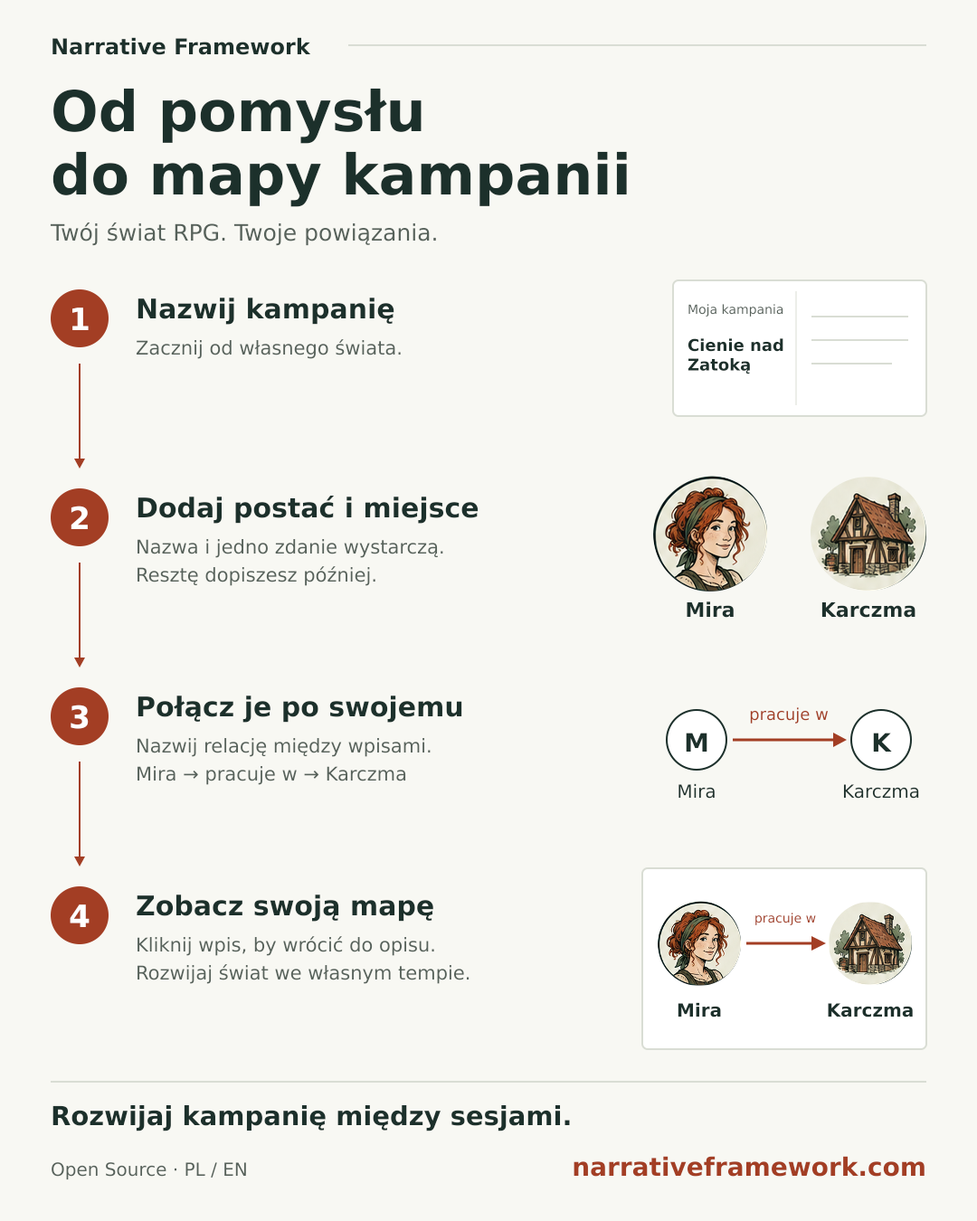
<style>
.page{position:relative;width:977px;height:1221px;background:#f8f8f3}
.page>*{position:absolute;margin:0}
.t1{font:21.7px "DejaVuSans-Bold";color:#1c302b}
.t2{font:56.1px "DejaVuSans-Bold";color:#1c302b}
.t3{font:22.6px "DejaVuSans-Regular";color:#56615a}
.t4{font:27.1px "DejaVuSans-Bold";color:#1c302b}
.t5{font:12.7px "DejaVuSans-Regular";color:#56615a}
.t6{font:30.7px "DejaVuSans-Bold";color:#ffffff}
.t7{font:19px "DejaVuSans-Regular";color:#56615a}
.t8{font:16.3px "DejaVuSans-Bold";color:#1c302b}
.t9{font:19.9px "DejaVuSans-Bold";color:#1c302b}
.t10{font:16.3px "DejaVuSans-Regular";color:#a33e24}
.t11{font:25.3px "DejaVuSans-Bold";color:#1c302b}
.t12{font:18.1px "DejaVuSans-Regular";color:#1c302b}
.t13{font:12.7px "DejaVuSans-Regular";color:#a33e24}
.t14{font:18.1px "DejaVuSans-Bold";color:#1c302b}
.t15{font:26.2px "DejaVuSans-Bold";color:#1c302b}
.t16{font:25.3px "DejaVuSans-Bold";color:#a33e24}
.t17{font:18.1px "DejaVuSans-Regular";color:#56615a}
</style>
<div class="page">
<p class="t1" style="left:52px;top:37px;width:260px;height:19px">Narrative Framework</p>
<p class="t2" style="left:52px;top:88px;width:370px;height:57px">Od pomysłu</p>
<p class="t2" style="left:52px;top:151px;width:576px;height:57px">do mapy kampanii</p>
<p class="t3" style="left:49px;top:222px;width:388px;height:25px">Twój świat RPG. Twoje powiązania.</p>
<p class="t4" style="left:137px;top:298px;width:258px;height:28px">Nazwij kampanię</p>
<p class="t5" style="left:687px;top:304px;width:97px;height:13px">Moja kampania</p>
<p class="t6" style="left:71px;top:307px;width:19px;height:24px">1</p>
<p class="t7" style="left:135px;top:339px;width:267px;height:21px">Zacznij od własnego świata.</p>
<p class="t8" style="left:686px;top:338px;width:98px;height:37px">Cienie nad<br>Zatoką</p>
<p class="t4" style="left:137px;top:496px;width:342px;height:29px">Dodaj postać i miejsce</p>
<p class="t6" style="left:70px;top:506px;width:19px;height:24px">2</p>
<p class="t7" style="left:137px;top:539px;width:307px;height:20px">Nazwa i jedno zdanie wystarczą.</p>
<p class="t7" style="left:137px;top:566px;width:239px;height:21px">Resztę dopiszesz później.</p>
<p class="t9" style="left:685px;top:601px;width:49px;height:18px">Mira</p>
<p class="t9" style="left:820px;top:601px;width:96px;height:18px">Karczma</p>
<p class="t4" style="left:137px;top:695px;width:326px;height:28px">Połącz je po swojemu</p>
<p class="t6" style="left:70px;top:704px;width:20px;height:26px">3</p>
<p class="t10" style="left:749px;top:707px;width:80px;height:17px">pracuje w</p>
<p class="t7" style="left:137px;top:738px;width:294px;height:20px">Nazwij relację między wpisami.</p>
<p class="t11" style="left:685px;top:733px;width:23px;height:19px">M</p>
<p class="t11" style="left:872px;top:733px;width:21px;height:19px">K</p>
<p class="t7" style="left:137px;top:766px;width:270px;height:20px">Mira → pracuje w → Karczma</p>
<p class="t12" style="left:677px;top:783px;width:38px;height:16px">Mira</p>
<p class="t12" style="left:842px;top:784px;width:78px;height:15px">Karczma</p>
<p class="t6" style="left:69px;top:904px;width:21px;height:23px">4</p>
<p class="t4" style="left:136px;top:894px;width:298px;height:28px">Zobacz swoją mapę</p>
<p class="t13" style="left:754px;top:912px;width:63px;height:14px">pracuje w</p>
<p class="t7" style="left:137px;top:936px;width:298px;height:20px">Kliknij wpis, by wrócić do opisu.</p>
<p class="t7" style="left:137px;top:964px;width:333px;height:21px">Rozwijaj świat we własnym tempie.</p>
<p class="t14" style="left:676px;top:1002px;width:46px;height:16px">Mira</p>
<p class="t14" style="left:827px;top:1003px;width:86px;height:15px">Karczma</p>
<p class="t15" style="left:52px;top:1104px;width:519px;height:28px">Rozwijaj kampanię między sesjami.</p>
<p class="t16" style="left:572px;top:1156px;width:353px;height:21px">narrativeframework.com</p>
<p class="t17" style="left:51px;top:1162px;width:196px;height:19px">Open Source · PL / EN</p>
</div>
